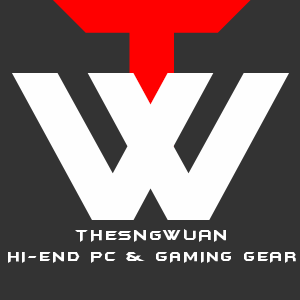
<style>
.page{position:relative;width:300px;height:300px;background:#333333}
.page>*{position:absolute;margin:0}
.t1{font:250px "SVN-BatmanForeverAlternate";letter-spacing:0.1em;color:#ff0000}
.t2{font:250px "SVN-BatmanForeverAlternate";letter-spacing:0.1em;color:#fefefe}
.t3{font:16px "SVN-BatmanForeverAlternate";letter-spacing:0.1em;color:#fefefe}
.t4{font:15px "SVN-BatmanForeverAlternate";letter-spacing:0.1em;color:#fefefe}
</style>
<div class="page">
<p class="t1" style="left:53px;top:0px;width:198px;height:173px">T</p>
<p class="t2" style="left:12px;top:73px;width:277px;height:147px">W</p>
<p class="t3" style="left:75px;top:229px;width:151px;height:13px">THESNGWUAN</p>
<p class="t4" style="left:8px;top:252px;width:288px;height:11px">HI-END PC &amp; GAMING GEAR</p>
</div>
